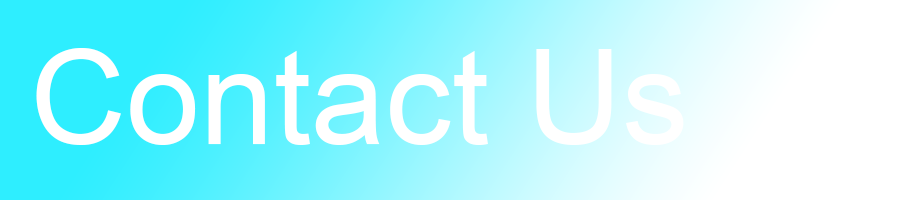
<style>
.page{position:relative;width:900px;height:200px;background:#ffffff}
.page>*{position:absolute;margin:0}
.t1{font:133.3px "ArialMT";color:#ffffff}
</style>
<div class="page">
<p class="t1" style="left:36px;top:48px;width:648px;height:97px">Contact Us</p>
</div>
